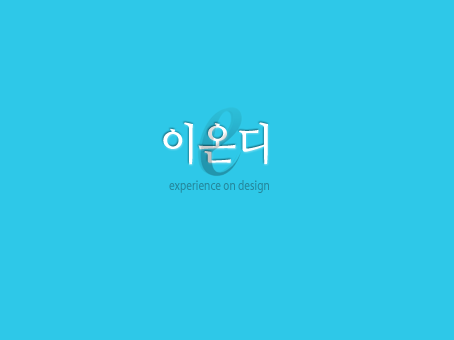
<style>
.page{position:relative;width:454px;height:340px;background:#2ec8e8}
.page>*{position:absolute;margin:0}
.t1{font:44px "NanumMyeongjoBold";color:#ffffff;scale:0.91 1}
.t2{font:14.3px "Myriad-CnWeb";color:#24889d;scale:0.91 1}
</style>
<div class="page">
<p class="t1" style="left:163px;top:122px;width:105px;height:43px">이온디</p>
<p class="t2" style="left:169px;top:180px;width:100px;height:13px">experience on design</p>
</div>
